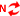
<style>
.page{position:relative;width:20px;height:16px;background:#ffffff}
.page>*{position:absolute;margin:0}
.t1{font:10px "DejaVuSans";color:#ff0000}
</style>
<div class="page">
<p class="t1" style="left:0px;top:4px;width:6px;height:8px">N</p>
</div>
